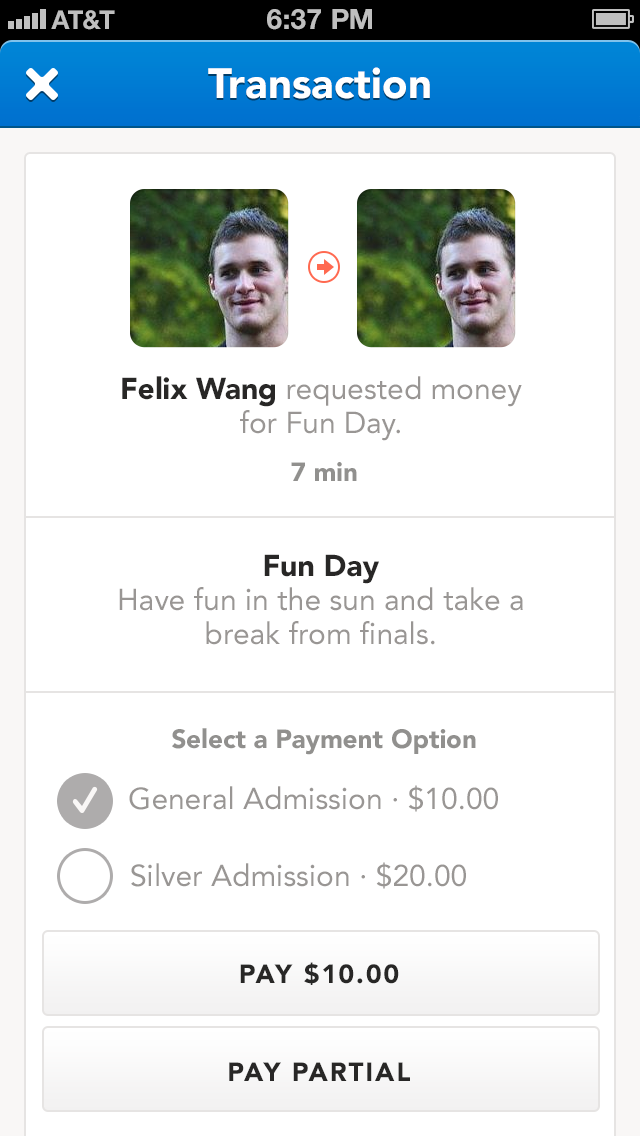
<style>
.page{position:relative;width:640px;height:1136px;background:#ffffff}
.page>*{position:absolute;margin:0}
.t1{font:42px "Avenir-Black";color:#ffffff}
.t2{font:30px/34px "Avenir-Roman";color:#999694}
.t3{font:30px/34px "Avenir-Black";color:#282726}
.t4{font:26px "Avenir-Black";color:#91908e}
.t5{font:30px "Avenir-Roman";color:#999694}
.t6{font:26px "Avenir-Black";letter-spacing:0.08em;color:#282726;text-transform:uppercase}
</style>
<div class="page">
<p class="t1" style="left:208px;top:67px;width:222px;height:32px">Transaction</p>
<p class="t2" style="left:122px;top:376px;width:400px;height:65px;text-align:center"><span class="t3">Felix Wang </span>requested money <br>for Fun Day.</p>
<p class="t4" style="left:291px;top:462px;width:66px;height:19px">7 min</p>
<p class="t2" style="left:119px;top:554px;width:404px;height:91px;text-align:center"><span class="t3">Fun Day<br></span>Have fun in the sun and take a break from finals.</p>
<p class="t4" style="left:172px;top:728px;width:304px;height:27px">Select a Payment Option</p>
<p class="t5" style="left:129px;top:785px;width:369px;height:27px">General Admission · $10.00</p>
<p class="t5" style="left:131px;top:862px;width:335px;height:27px">Silver Admission · $20.00</p>
<p class="t6" style="left:240px;top:962px;width:159px;height:23px">Pay $10.00</p>
<p class="t6" style="left:229px;top:1062px;width:181px;height:19px">Pay Partial</p>
</div>
